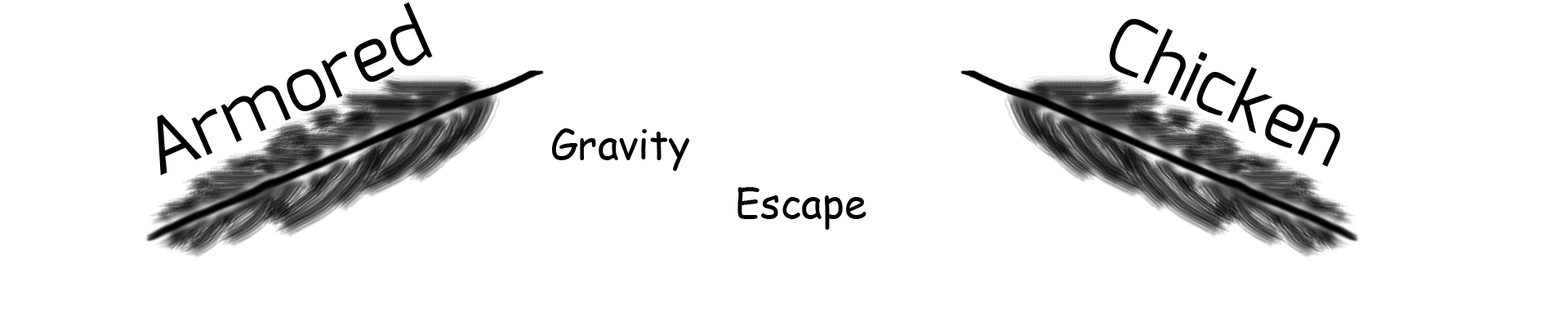
<style>
.page{position:relative;width:1568px;height:327px;background:#ffffff}
.page>*{position:absolute;margin:0}
.t1{font:74.9px "Exo-Regular";color:#000000}
.t2{font:40.8px "ComicSansMS";color:#000000}
</style>
<div class="page">
<p class="t1" style="left:157px;top:2px;width:276px;height:174px;rotate:-24deg">Armored</p>
<p class="t1" style="left:1109px;top:19px;width:231px;height:148px;rotate:25deg">Chicken</p>
<p class="t2" style="left:552px;top:128px;width:137px;height:43px">Gravity</p>
<p class="t2" style="left:737px;top:187px;width:129px;height:42px">Escape</p>
</div>
